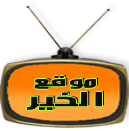
<style>
.page{position:relative;width:129px;height:131px;background:#ffffff}
.page>*{position:absolute;margin:0}
.t1{font:24px/10.1px "khalaad-al-arabeh";letter-spacing:0.025em;color:#0f0e0e;scale:2.22 1}
.t2{font:17.3px/10.1px "khalaad-al-arabeh";letter-spacing:0.025em;color:#0f0e0e;scale:2.22 1}
</style>
<div class="page">
<p class="t1" style="left:27px;top:76px;width:75px;height:34px;text-align:center"><span class="t2">موقع<br><br></span>الخير</p>
</div>
